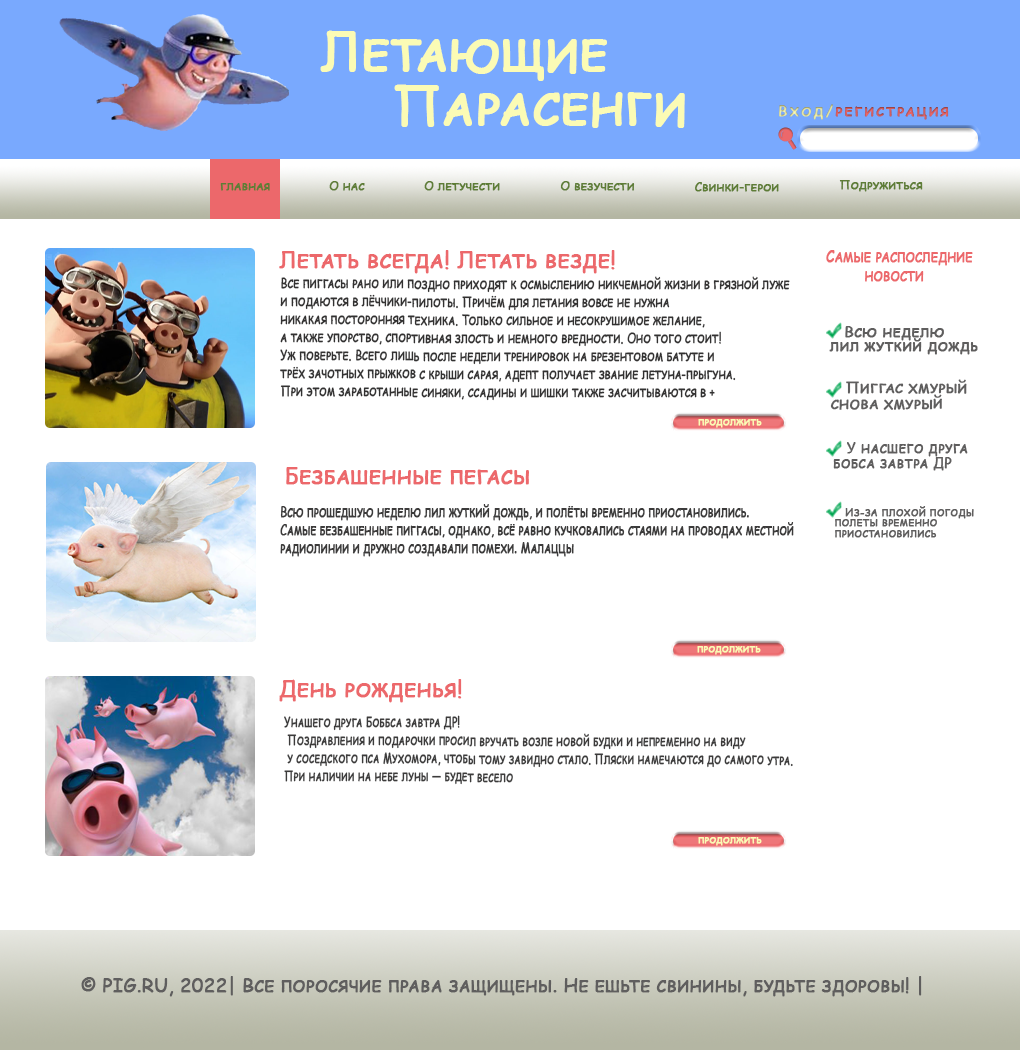
<style>
.page{position:relative;width:1020px;height:1050px;background:#ffffff}
.page>*{position:absolute;margin:0}
.t1{font:53px/6px "ComicSansMS";letter-spacing:-0.01em;color:#fbfbb5;font-variant:small-caps;font-weight:bold}
.t2{font:11.9px "ComicSansMS";letter-spacing:-0.01em;color:#5e7d36;font-variant:small-caps;font-weight:bold}
.t3{font:12px "ComicSansMS";letter-spacing:-0.01em;color:#5e7d36;font-variant:small-caps;font-weight:bold}
.t4{font:23px "ComicSansMS";letter-spacing:-0.01em;color:#ec686b;font-variant:small-caps;font-weight:bold}
.t5{font:15.8px/4.7px "ComicSansMS";letter-spacing:-0.01em;color:#ec686b;font-variant:small-caps;font-weight:bold;scale:0.86 1}
.t6{font:14px/6px "ComicSansMS";letter-spacing:-0.01em;color:#323131;font-variant:small-caps;font-weight:bold;scale:0.78 1}
.t7{font:15.4px/4.6px "ComicSansMS";letter-spacing:-0.01em;color:#5f5e5e;font-variant:small-caps;font-weight:bold}
.t8{font:15.2px/4px "ComicSansMS";letter-spacing:-0.01em;color:#5f5e5e;font-variant:small-caps;font-weight:bold}
.t9{font:10px "ComicSansMS";letter-spacing:-0.01em;color:#fbfbb5;font-variant:small-caps;font-weight:bold}
.t10{font:14.4px/3.8px "ComicSansMS";letter-spacing:-0.01em;color:#5f5e5e;font-variant:small-caps;font-weight:bold}
.t11{font:14px/6px "ComicSansMS";letter-spacing:-0.01em;color:#3c3b3b;font-variant:small-caps;font-weight:bold;scale:0.77 1}
.t12{font:11.3px/3.6px "ComicSansMS";letter-spacing:-0.01em;color:#5f5e5e;font-variant:small-caps;font-weight:bold}
.t13{font:14px/6px "ComicSansMS";letter-spacing:-0.01em;color:#3c3b3b;font-variant:small-caps;font-weight:bold;scale:0.74 1}
.t14{font:19px "ComicSansMS";letter-spacing:-0.01em;color:#5f5e5e;font-variant:small-caps;font-weight:bold}
</style>
<div class="page">
<p class="t1" style="left:320px;top:30px;width:365px;height:98px">Летающие<br><br><br><br><br>   <br>    <br>    <br><br>     Парасенги</p>
<p class="t2" style="left:220px;top:183px;width:50px;height:8px">главная</p>
<p class="t3" style="left:329px;top:181px;width:36px;height:10px">О нас</p>
<p class="t3" style="left:424px;top:181px;width:76px;height:10px">О летучести</p>
<p class="t3" style="left:560px;top:181px;width:75px;height:10px">О везучести</p>
<p class="t3" style="left:695px;top:182px;width:84px;height:10px">Свинки-герои</p>
<p class="t3" style="left:839px;top:180px;width:84px;height:12px">Подружиться</p>
<p class="t4" style="left:279px;top:250px;width:336px;height:24px">Летать всегда! Летать везде!</p>
<p class="t5" style="left:826px;top:250px;width:147px;height:32px">Самые распоследние <br><br>         <br><br>         новости</p>
<p class="t6" style="left:280px;top:276px;width:510px;height:125px">Все пиггасы рано или поздно приходят к осмыслению никчемной жизни в грязной луже <br><br><br>и подаются в лёччики-пилоты. Причём для летания вовсе не нужна <br><br><br>никакая посторонняя техника. Только сильное и несокрушимое желание, <br><br><br>а также упорство, спортивная злость и немного вредности. Оно того стоит! <br><br><br>Уж поверьте. Всего лишь после недели тренировок на брезентовом батуте и <br><br><br>трёх зачотных прыжков с крыши сарая, адепт получает звание летуна-прыгуна. <br><br><br>При этом заработанные синяки, ссадины и шишки также засчитываются в +</p>
<p class="t7" style="left:829px;top:326px;width:149px;height:29px">Всю неделю <br><br><br>лил жуткий дождь</p>
<p class="t8" style="left:830px;top:379px;width:137px;height:31px">Пиггас хмурый <br><br><br><br>снова хмурый</p>
<p class="t9" style="left:698px;top:419px;width:64px;height:9px">продолжить</p>
<p class="t10" style="left:833px;top:442px;width:135px;height:29px">У насшего друга<br> <br><br><br>бобса завтра ДР</p>
<p class="t4" style="left:286px;top:467px;width:243px;height:18px">Безбашенные пегасы</p>
<p class="t11" style="left:280px;top:504px;width:514px;height:53px">Всю прошедшую неделю лил жуткий дождь, и полёты временно приостановились. <br><br><br>Самые безбашенные пиггасы, однако, всё равно кучковались стаями на проводах местной <br><br><br>радиолинии и дружно создавали помехи. Малаццы</p>
<p class="t12" style="left:835px;top:506px;width:139px;height:32px">Из-за плохой погоды<br><br><br>полеты временно<br><br><br>приостановились</p>
<p class="t9" style="left:697px;top:646px;width:64px;height:9px">продолжить</p>
<p class="t4" style="left:279px;top:679px;width:183px;height:24px">День рожденья!</p>
<p class="t13" style="left:284px;top:715px;width:509px;height:70px">Унашего друга Боббса завтра ДР!<br><br><br> Поздравления и подарочки просил вручать возле новой будки и непременно на виду<br><br><br> у соседского пса Мухомора, чтобы тому завидно стало. Пляски намечаются до самого утра. <br><br><br>При наличии на небе луны — будет весело</p>
<p class="t9" style="left:698px;top:837px;width:64px;height:9px">продолжить</p>
<p class="t14" style="left:81px;top:976px;width:841px;height:21px">© PIG.RU, 2022| Все поросячие права защищены. Не ешьте свинины, будьте здоровы! |</p>
</div>
